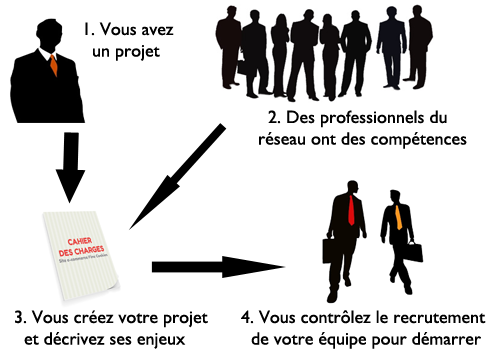
<style>
.page{position:relative;width:500px;height:350px;background:#ffffff}
.page>*{position:absolute;margin:0}
.t1{font:18px "GillSans";color:#000000}
</style>
<div class="page">
<p class="t1" style="left:85px;top:22px;width:89px;height:39px">1. Vous avez<br>  un projet</p>
<p class="t1" style="left:259px;top:110px;width:208px;height:39px">2. Des professionnels du<br>réseau ont des compétences</p>
<p class="t1" style="left:15px;top:310px;width:193px;height:39px">3. Vous créez votre projet<br>  et décrivez ses enjeux</p>
<p class="t1" style="left:241px;top:310px;width:245px;height:39px">4. Vous contrôlez le recrutement<br>  de votre équipe pour démarrer</p>
</div>
